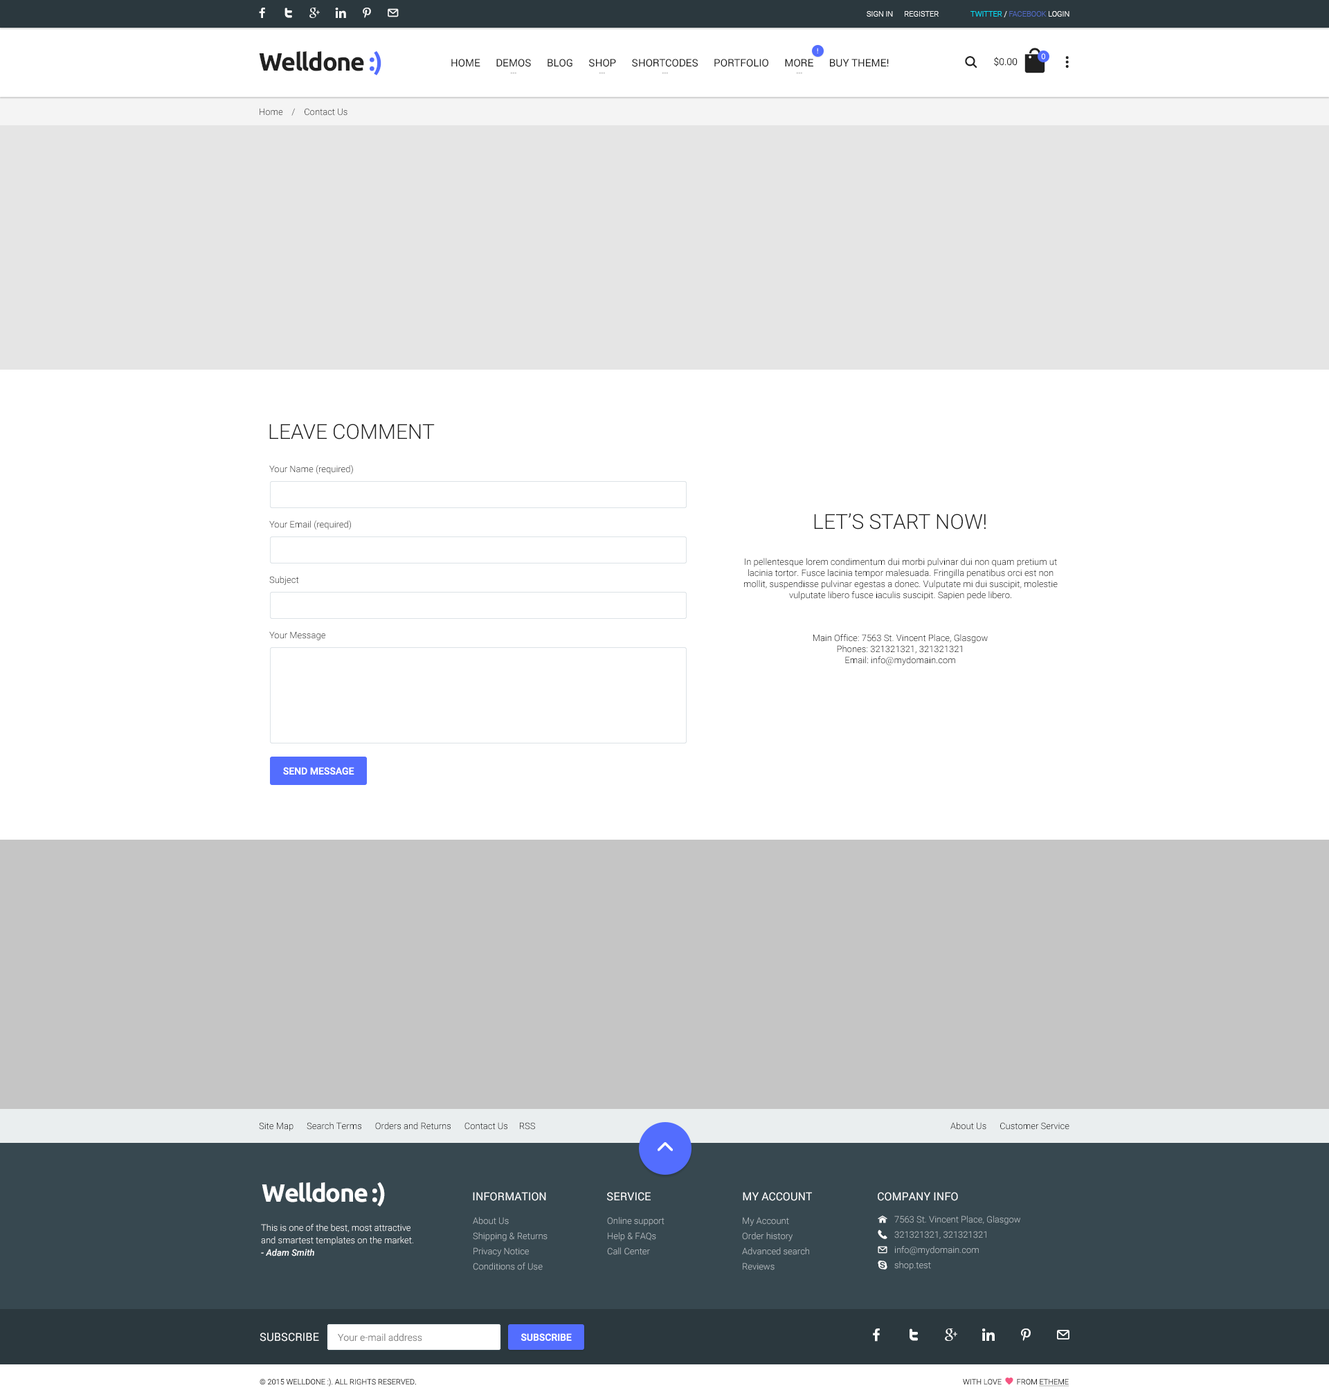
<style>
.page{position:relative;width:1329px;height:1399px;background:#ffffff}
.page>*{position:absolute;margin:0}
.t1{font:7.6px "Roboto-Light";color:#ffffff}
.t2{font:7.6px "Roboto-Light";color:#526ac4}
.t3{font:7.6px "Roboto-Light";color:#00e4ff}
.t4{font:24.9px "Ubuntu-Bold";letter-spacing:-0.04em;color:#212121}
.t5{font:24.9px "Ubuntu-Bold";letter-spacing:-0.04em;color:#536dfe}
.t6{font:6.9px "Roboto-Regular"}
.t7{font:10.4px "Roboto-Regular";color:#212121}
.t8{font:9.7px "Roboto-Light";color:#212121}
.t9{font:9px "Roboto-Light";color:#2b2b2b}
.t10{font:20.8px "Roboto-Light";color:#212121;text-transform:uppercase}
.t11{font:9px/55.4px "Roboto-Light";color:#212121}
.t12{font:9px/11.1px "Roboto-Light";color:#000000}
.t13{font:9.7px "Roboto-Medium";color:#ffffff;text-transform:uppercase}
.t14{font:9px "Roboto-Light";color:#000000}
.t15{font:24.9px "Ubuntu-Bold";letter-spacing:-0.04em;color:#ffffff}
.t16{font:11.1px "Roboto-Regular";color:#ffffff;text-transform:uppercase}
.t17{font:9px/15.2px "Roboto-Light";color:#bbc2c6}
.t18{font:9px/12.5px "Roboto-Light";color:#ffffff}
.t19{font:9px/12.5px "Roboto-MediumItalic";color:#ffffff}
.t20{font:9.7px "Roboto-Light";color:#848484}
.t21{font:7.6px "Roboto-Light";color:#2b2b2b;text-transform:uppercase}
</style>
<div class="page">
<p class="t1" style="left:867px;top:11px;width:72px;height:6px">SIGN IN      REGISTER</p>
<p class="t2" style="left:971px;top:11px;width:99px;height:6px"><span class="t3">TWITTER </span><span class="t1">/ </span>FACEBOOK <span class="t1">LOGIN</span></p>
<p class="t4" style="left:259px;top:51px;width:122px;height:24px">Welldone <span class="t5">:)</span></p>
<p class="t6" style="left:817px;top:48px;width:1px;height:5px">!</p>
<p class="t1" style="left:1041px;top:53px;width:4px;height:7px">0</p>
<p class="t7" style="left:451px;top:59px;width:438px;height:8px">HOME      DEMOS      BLOG      SHOP      SHORTCODES      PORTFOLIO      MORE      BUY THEME!</p>
<p class="t8" style="left:994px;top:57px;width:24px;height:9px">$0.00</p>
<p class="t9" style="left:260px;top:108px;width:88px;height:8px">Home    /    Contact Us</p>
<p class="t10" style="left:269px;top:424px;width:166px;height:16px">Leave Comment</p>
<p class="t11" style="left:269px;top:465px;width:84px;height:175px">Your Name (required)<br>Your Email (required)<br>Subject<br>Your Message</p>
<p class="t10" style="left:814px;top:513px;width:173px;height:17px">Let’s Start Now!</p>
<p class="t12" style="left:744px;top:558px;width:314px;height:42px;text-align:center">In pellentesque lorem condimentum dui morbi pulvinar dui non quam pretium ut lacinia tortor. Fusce lacinia tempor malesuada. Fringilla penatibus orci est non mollit, suspendisse pulvinar egestas a donec. Vulputate mi dui suscipit, molestie vulputate libero fusce iaculis suscipit. Sapien pede libero.</p>
<p class="t12" style="left:813px;top:634px;width:175px;height:31px;text-align:center">Main Office: 7563 St. Vincent Place, Glasgow<br>Phones: 321321321, 321321321<br>Email: info@mydomain.com</p>
<p class="t13" style="left:283px;top:767px;width:71px;height:8px">Send Message</p>
<p class="t14" style="left:259px;top:1122px;width:276px;height:9px">Site Map      Search Terms      Orders and Returns      Contact Us     RSS</p>
<p class="t14" style="left:951px;top:1122px;width:119px;height:8px">About Us      Customer Service</p>
<p class="t15" style="left:262px;top:1182px;width:123px;height:25px">Welldone :)</p>
<p class="t16" style="left:473px;top:1192px;width:73px;height:9px">Information</p>
<p class="t16" style="left:607px;top:1192px;width:44px;height:9px">service</p>
<p class="t16" style="left:743px;top:1192px;width:69px;height:9px">My account</p>
<p class="t16" style="left:878px;top:1192px;width:80px;height:9px">Company Info</p>
<p class="t17" style="left:473px;top:1217px;width:75px;height:53px">About Us<br>Shipping &amp; Returns<br>Privacy Notice<br>Conditions of Use</p>
<p class="t17" style="left:607px;top:1217px;width:58px;height:38px">Online support<br>Help &amp; FAQs<br>Call Center</p>
<p class="t17" style="left:742px;top:1217px;width:67px;height:53px">My Account<br>Order history<br>Advanced search<br>Reviews</p>
<p class="t17" style="left:894px;top:1216px;width:126px;height:54px">7563 St. Vincent Place, Glasgow<br>321321321, 321321321<br>info@mydomain.com<br>shop.test</p>
<p class="t18" style="left:261px;top:1224px;width:152px;height:33px">This is one of the best, most attractive and smartest templates on the market. <br><span class="t19">- Adam Smith</span></p>
<p class="t16" style="left:260px;top:1333px;width:59px;height:9px">Subscribe</p>
<p class="t20" style="left:338px;top:1333px;width:84px;height:9px">Your e-mail address</p>
<p class="t13" style="left:521px;top:1333px;width:51px;height:8px">SUBSCRIBE</p>
<p class="t21" style="left:260px;top:1378px;width:156px;height:9px">© 2015 Welldone :). All Rights Reserved.</p>
</div>
